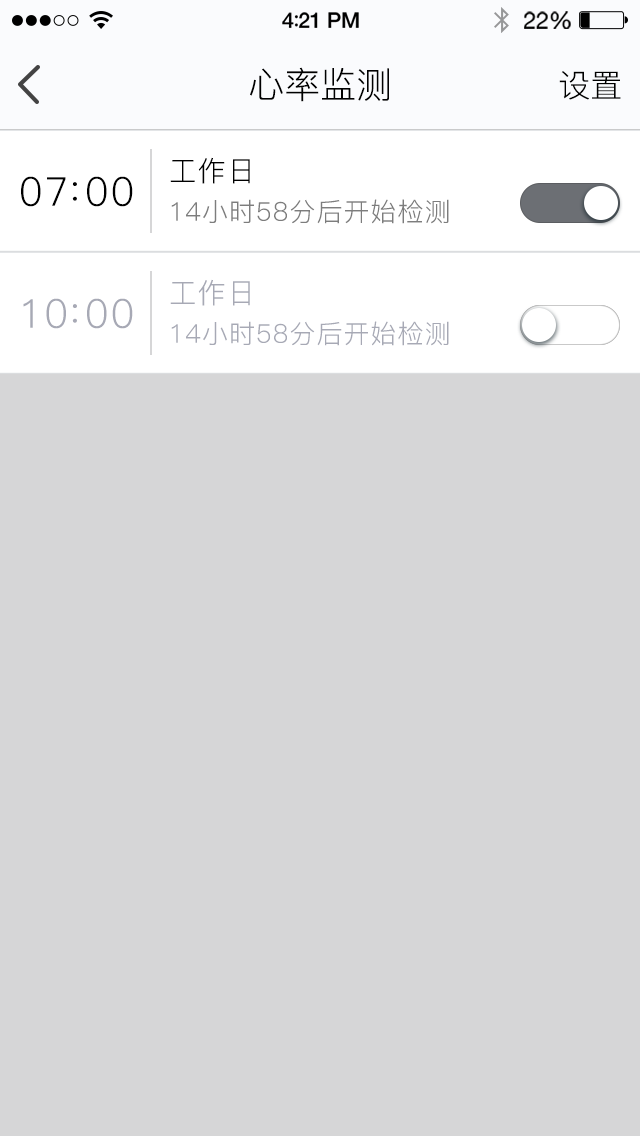
<style>
.page{position:relative;width:640px;height:1136px;background:#d6d6d7}
.page>*{position:absolute;margin:0}
.t1{font:36px "PingFang-SC-Regular";color:#000000}
.t2{font:32px "PingFang-SC-Regular";color:#000000}
.t3{font:28px "PingFang-SC-Regular";letter-spacing:0.04em;color:#000000}
.t4{font:40px "PingFang-SC-Regular";letter-spacing:0.04em;color:#000000}
.t5{font:26px "PingFang-SC-Regular";letter-spacing:0.04em;color:#7d7d7d}
.t6{font:28px "PingFang-SC-Regular";letter-spacing:0.04em;color:#a7a9b5}
.t7{font:40px "PingFang-SC-Regular";letter-spacing:0.04em;color:#a7a9b5}
.t8{font:26px "PingFang-SC-Regular";letter-spacing:0.04em;color:#a7a9b5}
</style>
<div class="page">
<p class="t1" style="left:250px;top:67px;width:139px;height:35px">心率监测</p>
<p class="t2" style="left:559px;top:71px;width:62px;height:29px">设置</p>
<p class="t3" style="left:170px;top:157px;width:80px;height:27px">工作日</p>
<p class="t4" style="left:21px;top:176px;width:112px;height:31px">07 00</p>
<p class="t4" style="left:72px;top:182px;width:5px;height:19px">:</p>
<p class="t5" style="left:171px;top:199px;width:278px;height:25px">14小时58分后开始检测</p>
<p class="t6" style="left:170px;top:279px;width:80px;height:27px">工作日</p>
<p class="t7" style="left:23px;top:298px;width:110px;height:31px">10 00</p>
<p class="t7" style="left:72px;top:304px;width:5px;height:19px">:</p>
<p class="t8" style="left:171px;top:321px;width:278px;height:25px">14小时58分后开始检测</p>
</div>
